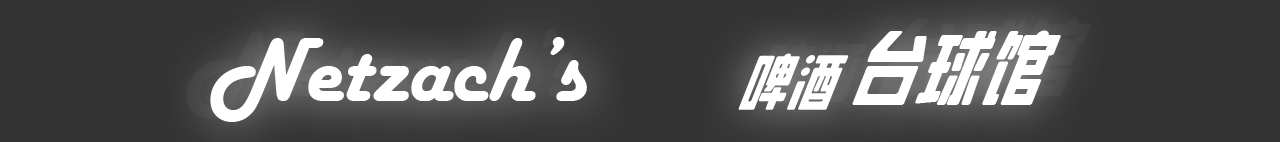
<style>
.page{position:relative;width:1280px;height:142px;background:#333333}
.page>*{position:absolute;margin:0}
.t1{font:86px "LEEFONTMENGHEI";color:#ffffff;scale:0.93 1}
.t2{font:77.4px "LEEFONTMENGHEI";color:#ffffff;scale:0.93 1}
.t3{font:94px "HarlowSolid";color:#ffffff}
.t4{font:64.5px "LEEFONTMENGHEI";color:#ffffff;scale:0.93 1}
</style>
<div class="page">
<p class="t1" style="left:852px;top:30px;width:209px;height:75px"><span class="t2"> </span>台球馆</p>
<p class="t3" style="left:210px;top:37px;width:377px;height:85px">Netzach’s</p>
<p class="t4" style="left:738px;top:53px;width:111px;height:57px">啤酒</p>
</div>
